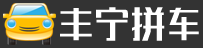
<style>
.page{position:relative;width:203px;height:48px;background:#333333}
.page>*{position:absolute;margin:0}
.t1{font:36px "RuixianSunHeiBoldGB1.0";color:#ffffff}
</style>
<div class="page">
<p class="t1" style="left:60px;top:7px;width:139px;height:34px">丰宁拼车</p>
</div>
